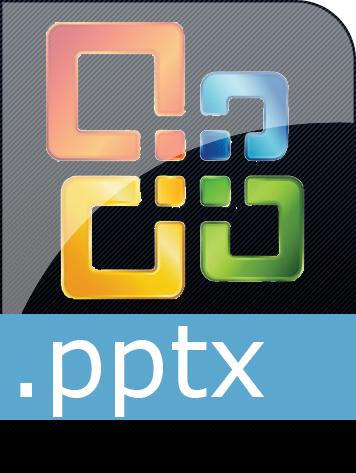
<style>
.page{position:relative;width:356px;height:473px;background:#5ca7ce}
.page>*{position:absolute;margin:0}
.t1{font:100px "Verdana";color:#ffffff}
</style>
<div class="page">
<p class="t1" style="left:20px;top:326px;width:245px;height:91px">.pptx</p>
</div>
